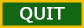
<style>
.page{position:relative;width:84px;height:28px;background:#116712}
.page>*{position:absolute;margin:0}
.t1{font:17px "Verdana";color:#ffffff;font-weight:bold}
</style>
<div class="page">
<p class="t1" style="left:20px;top:7px;width:45px;height:16px">QUIT</p>
</div>
